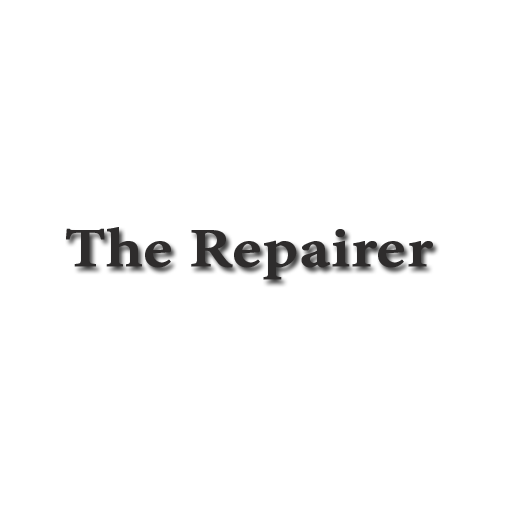
<style>
.page{position:relative;width:512px;height:512px;background:#ffffff}
.page>*{position:absolute;margin:0}
.t1{font:60px "AdobeDevanagari-Bold";color:#2e2c2c;font-weight:bold;scale:1.2 1}
</style>
<div class="page">
<p class="t1" style="left:66px;top:227px;width:367px;height:53px">The Repairer</p>
</div>
